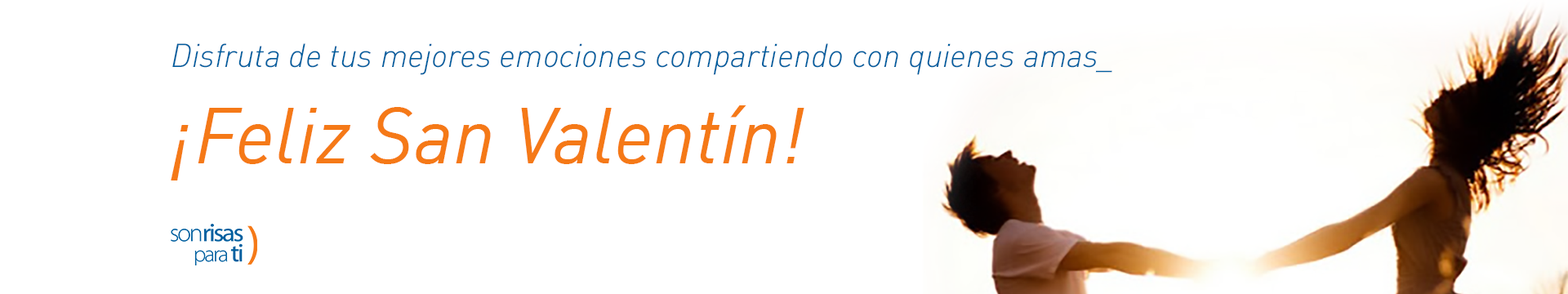
<style>
.page{position:relative;width:1568px;height:294px;background:#ffffff}
.page>*{position:absolute;margin:0}
.t1{font:32.7px "DIN-LightItalic";color:#005f9f}
.t2{font:78.4px "DIN-RegularItalic";color:#f57917}
</style>
<div class="page">
<p class="t1" style="left:172px;top:43px;width:940px;height:32px">Disfruta de tus mejores emociones compartiendo con quienes amas_</p>
<p class="t2" style="left:171px;top:105px;width:633px;height:75px">¡Feliz San Valentín!</p>
</div>
